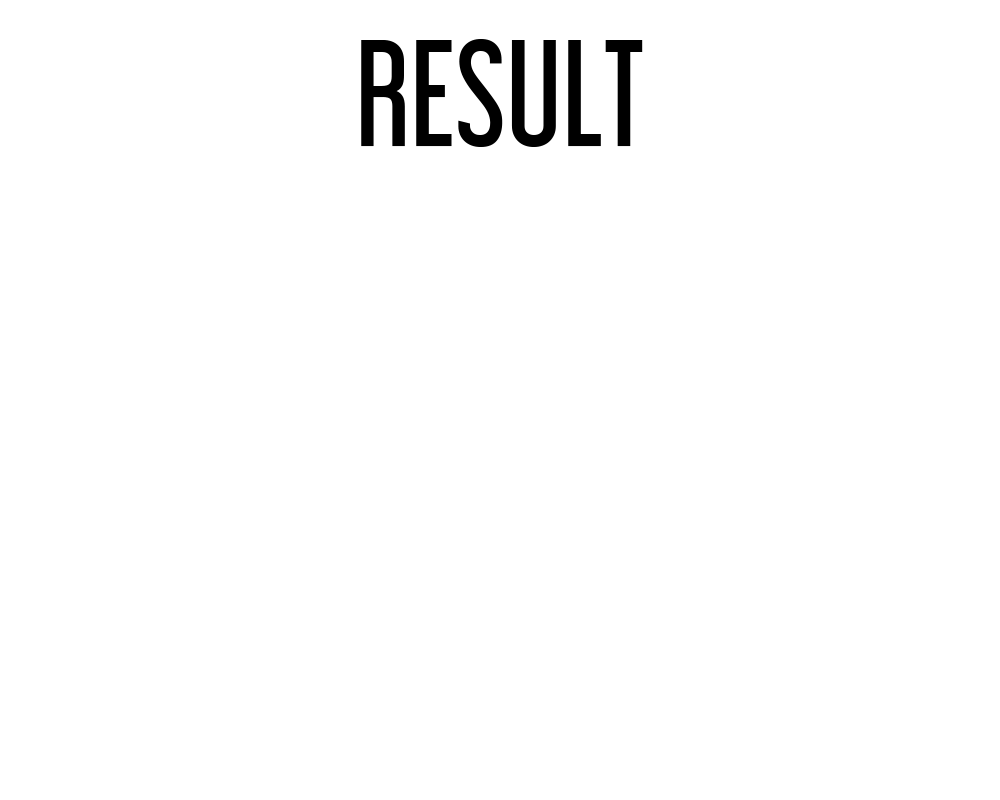
<style>
.page{position:relative;width:1000px;height:800px;background:#ffffff}
.page>*{position:absolute;margin:0}
.t1{font:135.8px "LibelSuitRg-Regular";color:#000000}
</style>
<div class="page">
<p class="t1" style="left:361px;top:39px;width:282px;height:108px">RESULT</p>
</div>
